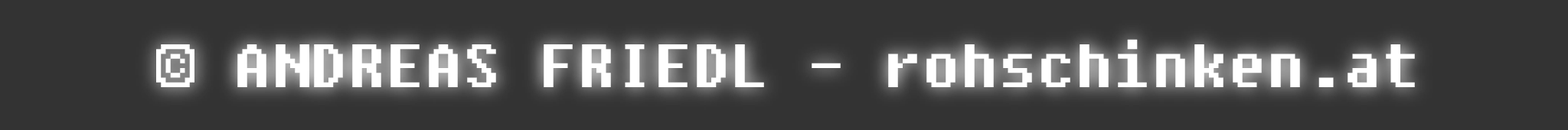
<style>
.page{position:relative;width:1568px;height:130px;background:#333333}
.page>*{position:absolute;margin:0}
.t1{font:61px "Fixedsys";color:#ffffff}
</style>
<div class="page">
<p class="t1" style="left:156px;top:39px;width:1259px;height:48px">© ANDREAS FRIEDL - rohschinken.at</p>
</div>
